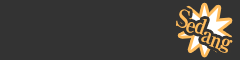
<style>
.page{position:relative;width:240px;height:60px;background:#333333}
.page>*{position:absolute;margin:0}
.t1{font:21.6px "RyuminPro-ExBold";letter-spacing:-0.08em;color:#ffbc5c;scale:0.9 1}
.t2{font:24px "RyuminPro-ExBold";letter-spacing:-0.08em;color:#ffbc5c;scale:0.9 1}
</style>
<div class="page">
<p class="t1" style="left:176px;top:9px;width:57px;height:44px;rotate:20deg"><span class="t2">S</span>edang</p>
</div>
